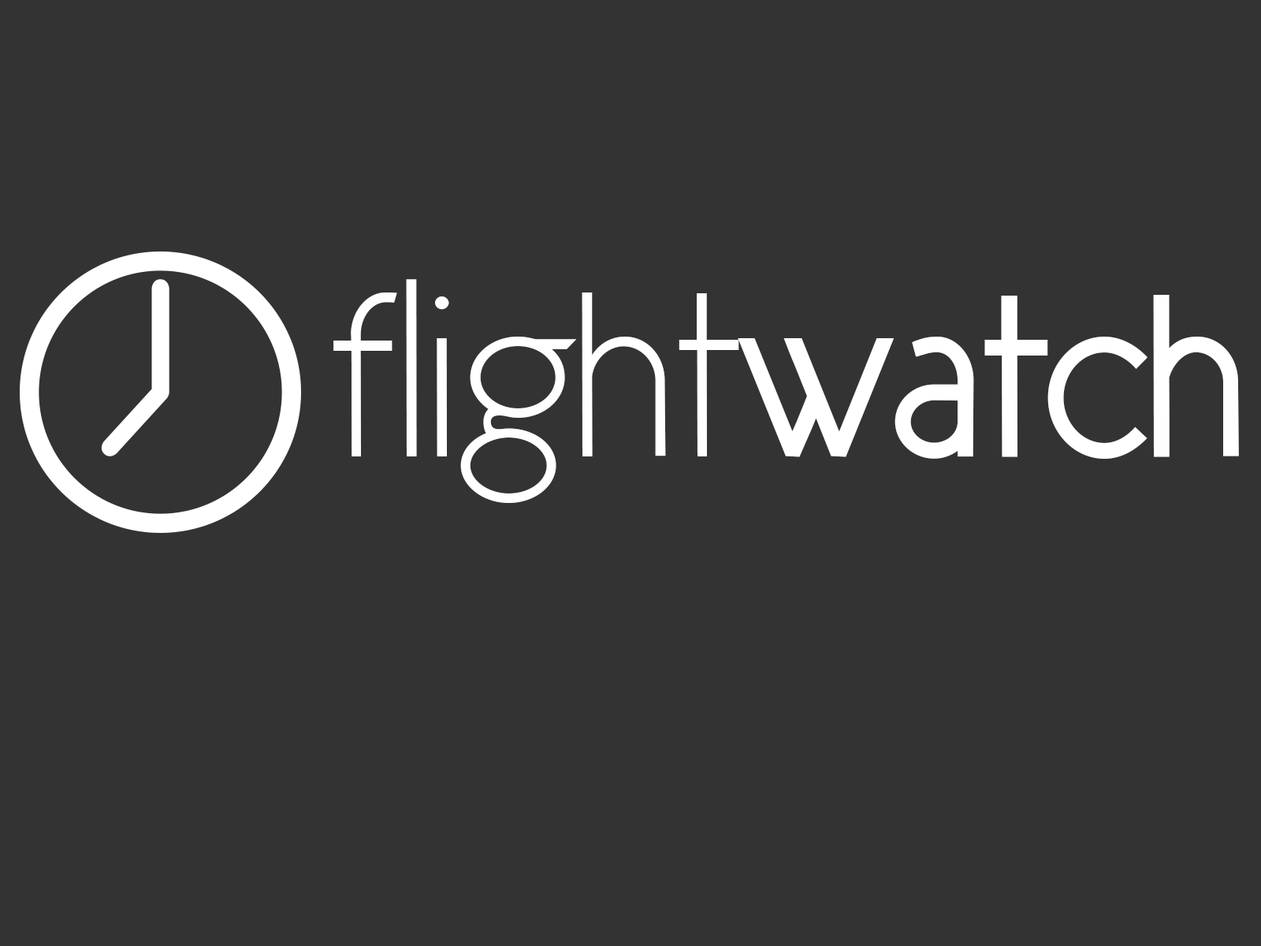
<style>
.page{position:relative;width:1261px;height:946px;background:#333333}
.page>*{position:absolute;margin:0}
.t1{font:236.4px "NewCicle-Fina";letter-spacing:-0.05em;color:#ffffff}
.t2{font:236.4px "NewCicle-Gordita";letter-spacing:-0.05em;color:#ffffff}
</style>
<div class="page">
<p class="t1" style="left:333px;top:279px;width:906px;height:224px">flight<span class="t2">watch</span></p>
</div>
